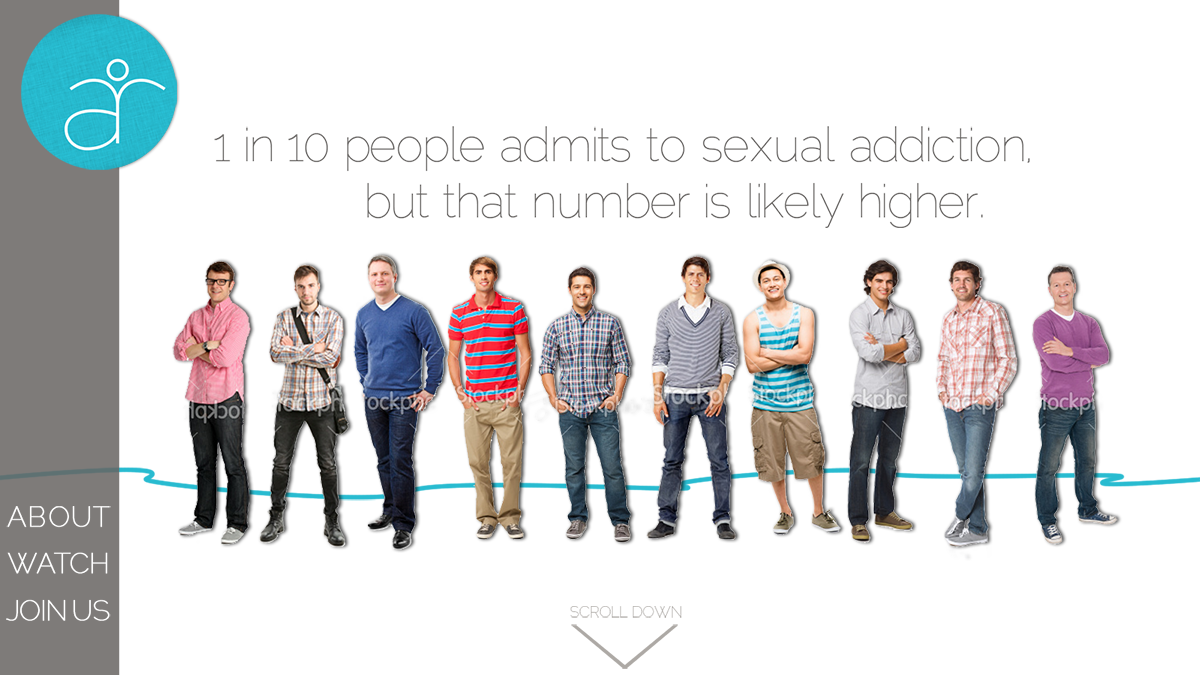
<style>
.page{position:relative;width:1200px;height:675px;background:#ffffff}
.page>*{position:absolute;margin:0}
.t1{font:46.9px/50px "Raleway-Thin";letter-spacing:-0.02em;color:#676462}
.t2{font:46.9px/56.3px "Raleway-Thin";letter-spacing:-0.02em;color:#676462}
.t3{font:28.1px/46.9px "Raleway-Thin";letter-spacing:-0.02em;color:#ffffff;font-weight:bold}
.t4{font:28.1px/46.9px "Raleway-Thin";letter-spacing:0.04em;color:#ffffff;font-weight:bold}
.t5{font:28.1px/46.9px "Raleway-Thin";letter-spacing:-0.08em;color:#ffffff;font-weight:bold}
.t6{font:28.1px/46.9px "Raleway-Thin";letter-spacing:-0.04em;color:#ffffff;font-weight:bold}
.t7{font:15.6px "Raleway-Thin";letter-spacing:-0.02em;color:#ada9a5}
</style>
<div class="page">
<p class="t1" style="left:214px;top:126px;width:816px;height:102px">1 in 10 people admits to sexual addiction,<br><span class="t2">but that number is likely higher.</span></p>
<p class="t3" style="left:6px;top:506px;width:105px;height:115px"><span class="t4">ABOUT<br></span><span class="t5">WA</span><span class="t6">T</span>CH<br>JOIN US</p>
<p class="t7" style="left:570px;top:606px;width:112px;height:12px">SCROLL DOWN</p>
</div>
